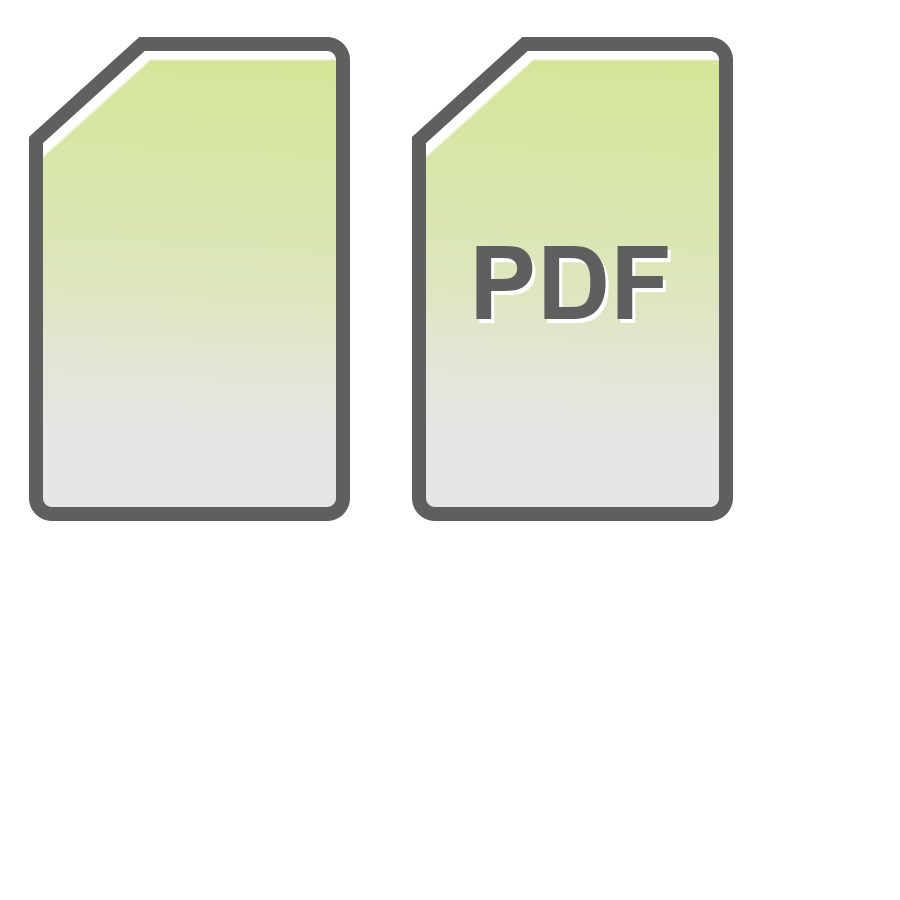
<style>
.page{position:relative;width:900px;height:900px;background:#ffffff}
.page>*{position:absolute;margin:0}
.t1{font:102px "Arial-BoldMT";color:#5f5f5f}
</style>
<div class="page">
<p class="t1" style="left:476px;top:246px;width:192px;height:73px">PDF</p>
</div>
